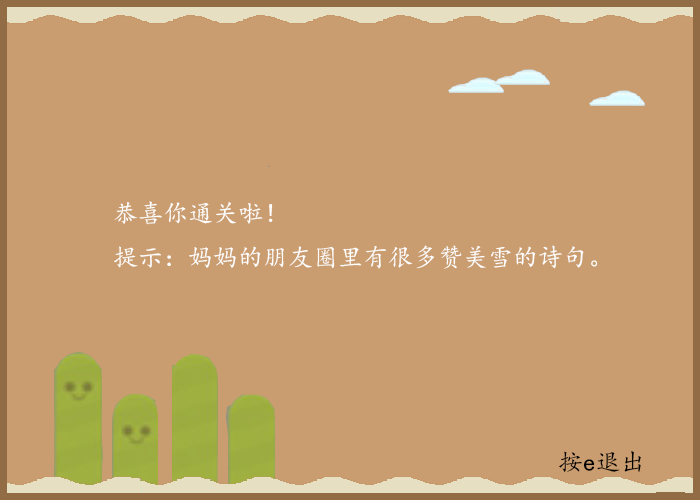
<style>
.page{position:relative;width:700px;height:500px;background:#ca9d70}
.page>*{position:absolute;margin:0}
.t1{font:25px "KaiTi";color:#ffffff}
.t2{font:25px "KaiTi";color:#000000}
</style>
<div class="page">
<p class="t1" style="left:114px;top:201px;width:484px;height:68px">恭喜你通关啦！<br>提示：妈妈的朋友圈里有很多赞美雪的诗句。</p>
<p class="t2" style="left:559px;top:451px;width:82px;height:21px">按e退出</p>
</div>
